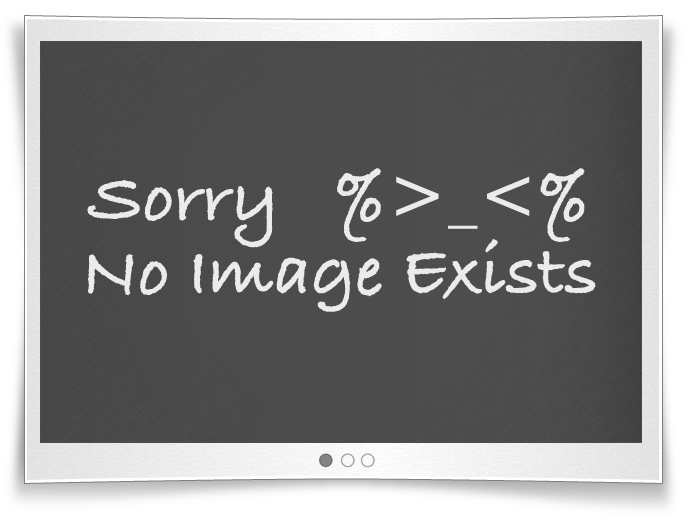
<style>
.page{position:relative;width:685px;height:518px}
.page>*{position:absolute;margin:0}
.t1{font:73px/37px "BradleyHandITCTTBold";color:#ebebeb}
</style>
<div class="page">
<p class="t1" style="left:87px;top:168px;width:509px;height:144px;text-align:center">Sorry   %&gt;_&lt;%<br><br>No Image Exists</p>
</div>
